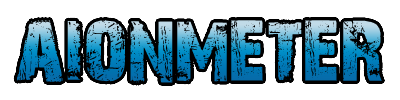
<style>
.page{position:relative;width:400px;height:100px;background:#ffffff}
.page>*{position:absolute;margin:0}
.t1{font:90px "28DaysLater"}
</style>
<div class="page">
<p class="t1" style="left:17px;top:20px;width:365px;height:63px">aionmeter</p>
</div>
